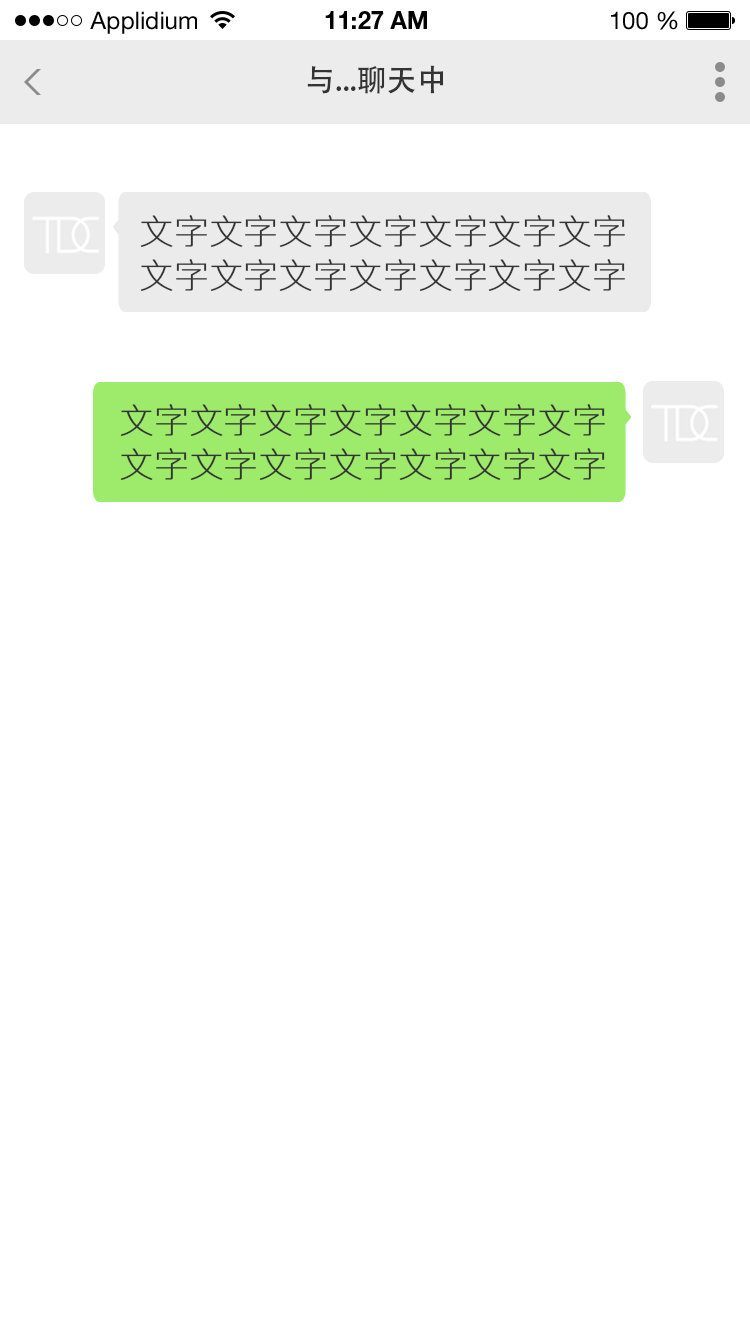
<style>
.page{position:relative;width:750px;height:1334px;background:#ffffff}
.page>*{position:absolute;margin:0}
.t1{font:24px "HelveticaNeueLTStd-Roman";color:#000000}
.t2{font:24px "HelveticaNeueLTStd-Bd";color:#000000}
.t3{font:30px "AdobeHeitiStd-Regular";color:#333333}
.t4{font:34px/44px "PingFang-SC-ExtraLight";color:#333333;font-weight:bold}
</style>
<div class="page">
<p class="t1" style="left:90px;top:11px;width:107px;height:23px">Applidium</p>
<p class="t2" style="left:325px;top:11px;width:102px;height:18px">11:27 AM</p>
<p class="t1" style="left:611px;top:11px;width:67px;height:19px">100 %</p>
<p class="t3" style="left:307px;top:65px;width:137px;height:29px">与...聊天中</p>
<p class="t4" style="left:140px;top:215px;width:485px;height:76px">文字文字文字文字文字文字文字<br>文字文字文字文字文字文字文字</p>
<p class="t4" style="left:120px;top:404px;width:485px;height:76px">文字文字文字文字文字文字文字<br>文字文字文字文字文字文字文字</p>
</div>
